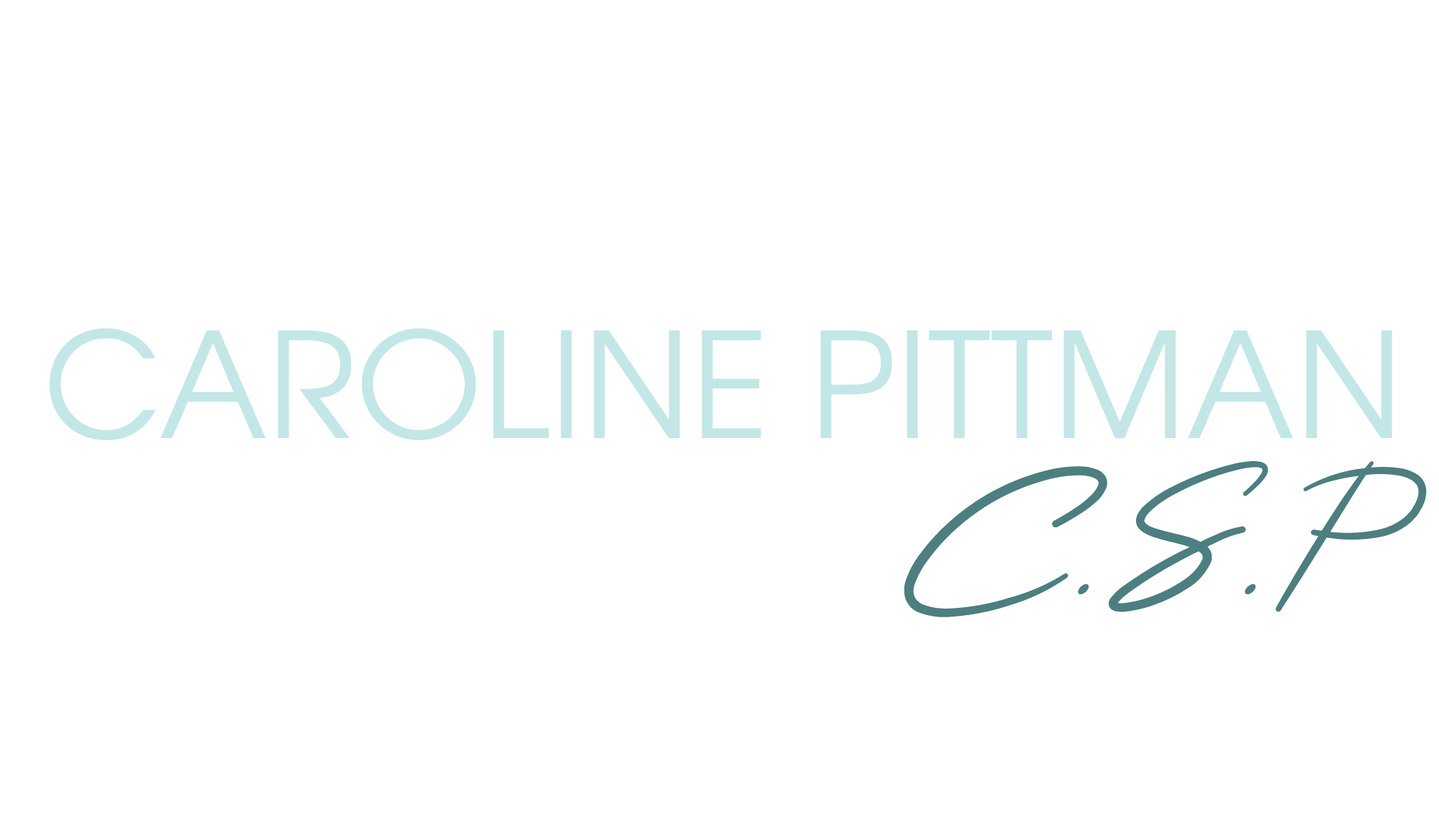
<style>
.page{position:relative;width:1439px;height:828px;background:#ffffff}
.page>*{position:absolute;margin:0}
.t1{font:145.9px "TeXGyreAdventor-Regular";color:#c3e7e7}
.t2{font:179.9px "HighSummit";color:#4d7e80}
</style>
<div class="page">
<p class="t1" style="left:50px;top:328px;width:1343px;height:112px">CAROLINE PITTMAN</p>
<p class="t2" style="left:904px;top:461px;width:523px;height:157px">C.S.P</p>
</div>
